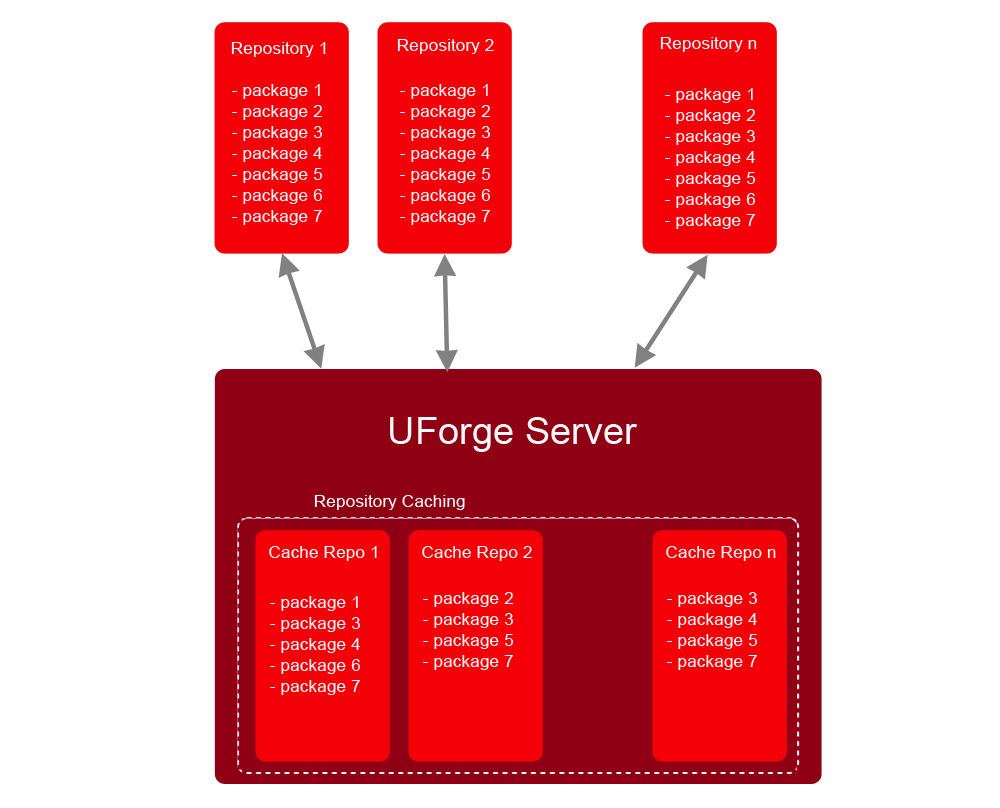
<style>
.page{position:relative;width:1000px;height:808px;background:#ffffff}
.page>*{position:absolute;margin:0}
.t1{font:17.4px "ArialMT";color:#fefbfb}
.t2{font:38px "ArialMT";color:#fefbfb}
</style>
<div class="page">
<p class="t1" style="left:397px;top:39px;width:97px;height:15px">Repository 2</p>
<p class="t1" style="left:660px;top:37px;width:97px;height:15px">Repository n</p>
<p class="t1" style="left:231px;top:42px;width:95px;height:15px">Repository 1</p>
<p class="t1" style="left:232px;top:84px;width:91px;height:141px;text-align:center">- package 1<br>- package 2<br>- package 3<br>- package 4<br>- package 5<br>- package 6<br>- package 7</p>
<p class="t1" style="left:400px;top:84px;width:91px;height:141px;text-align:center">- package 1<br>- package 2<br>- package 3<br>- package 4<br>- package 5<br>- package 6<br>- package 7</p>
<p class="t1" style="left:665px;top:88px;width:91px;height:141px;text-align:center">- package 1<br>- package 2<br>- package 3<br>- package 4<br>- package 5<br>- package 6<br>- package 7</p>
<p class="t2" style="left:390px;top:417px;width:248px;height:35px">UForge Server</p>
<p class="t1" style="left:314px;top:495px;width:151px;height:15px">Repository Caching</p>
<p class="t1" style="left:269px;top:546px;width:108px;height:15px">Cache Repo 1</p>
<p class="t1" style="left:422px;top:546px;width:110px;height:15px">Cache Repo 2</p>
<p class="t1" style="left:666px;top:546px;width:110px;height:15px">Cache Repo n</p>
<p class="t1" style="left:423px;top:592px;width:91px;height:78px;text-align:center">- package 2<br>- package 3<br>- package 5<br>- package 7</p>
<p class="t1" style="left:667px;top:592px;width:91px;height:78px;text-align:center">- package 3<br>- package 4<br>- package 5<br>- package 7</p>
<p class="t1" style="left:270px;top:596px;width:90px;height:99px;text-align:center">- package 1<br>- package 3<br>- package 4<br>- package 6<br>- package 7</p>
</div>
